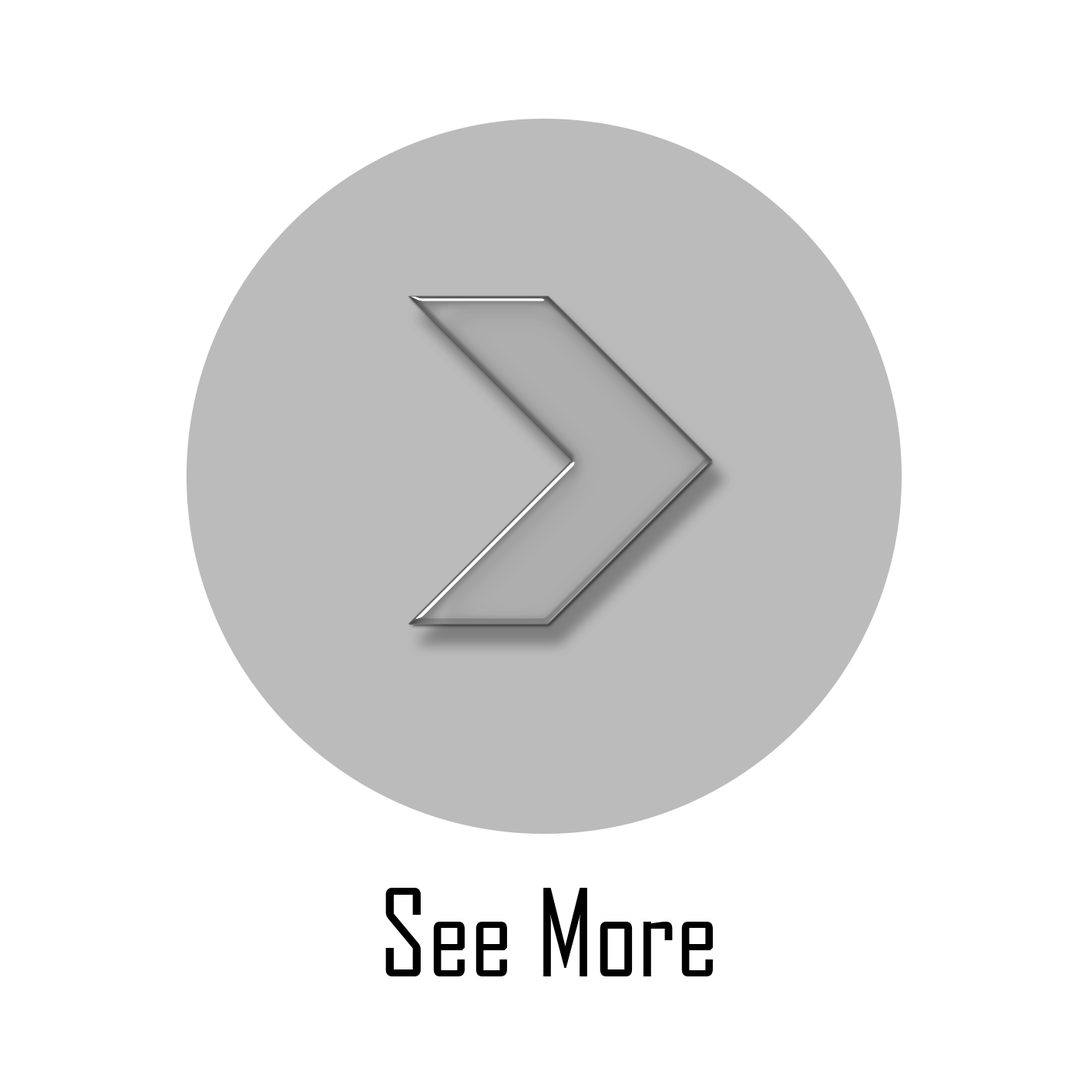
<style>
.page{position:relative;width:1092px;height:1092px;background:#ffffff}
.page>*{position:absolute;margin:0}
.t1{font:115.6px "AgencyFB-Reg";color:#000000}
</style>
<div class="page">
<p class="t1" style="left:385px;top:888px;width:328px;height:88px">See More</p>
</div>
